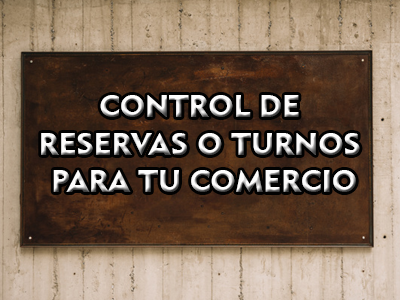
<style>
.page{position:relative;width:400px;height:300px}
.page>*{position:absolute;margin:0}
.t1{font:30.9px "Geometric415BT-BlackA"}
</style>
<div class="page">
<p class="t1" style="left:41px;top:95px;width:319px;height:97px;text-align:center">CONTROL DE<br>RESERVAS O TURNOS<br> PARA TU COMERCIO<br>DATOS PEDIDOS POUNICIPALIDAD DE LA COSTA</p>
</div>
